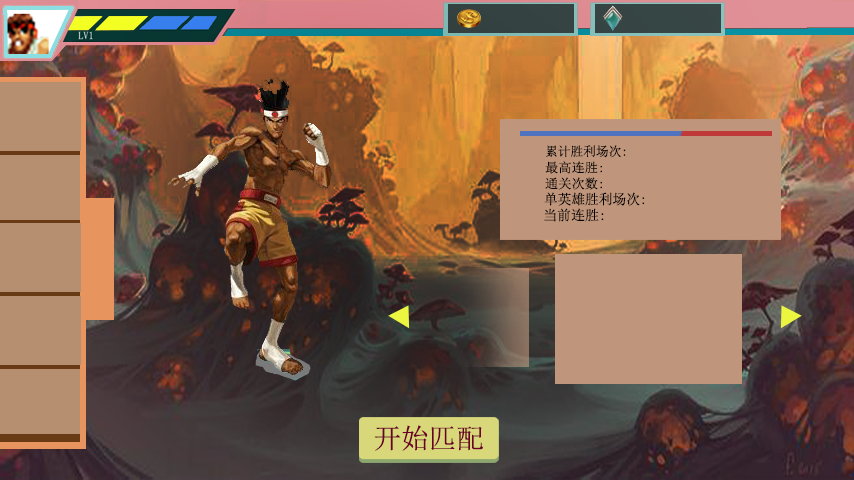
<style>
.page{position:relative;width:854px;height:480px}
.page>*{position:absolute;margin:0}
.t1{font:12.9px "SimSun";color:#000000}
.t2{font:13px "SimSun";color:#000000}
.t3{font:14px "SimSun";color:#000000}
.t4{font:27.6px "SimSun";color:#6c0029}
</style>
<div class="page">
<p class="t1" style="left:546px;top:145px;width:80px;height:13px">累计胜利场次:</p>
<p class="t2" style="left:545px;top:161px;width:57px;height:13px">最高连胜:</p>
<p class="t2" style="left:545px;top:177px;width:57px;height:13px">通关次数:</p>
<p class="t3" style="left:544px;top:192px;width:101px;height:14px">单英雄胜利场次:</p>
<p class="t3" style="left:544px;top:208px;width:60px;height:14px">当前连胜:</p>
<p class="t4" style="left:374px;top:425px;width:109px;height:26px">开始匹配</p>
</div>
